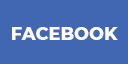
<style>
.page{position:relative;width:128px;height:64px;background:#4267b2}
.page>*{position:absolute;margin:0}
.t1{font:17.7px "Montserrat-ExtraBold";color:#ffffff}
</style>
<div class="page">
<p class="t1" style="left:12px;top:27px;width:106px;height:13px">FACEBOOK</p>
</div>
